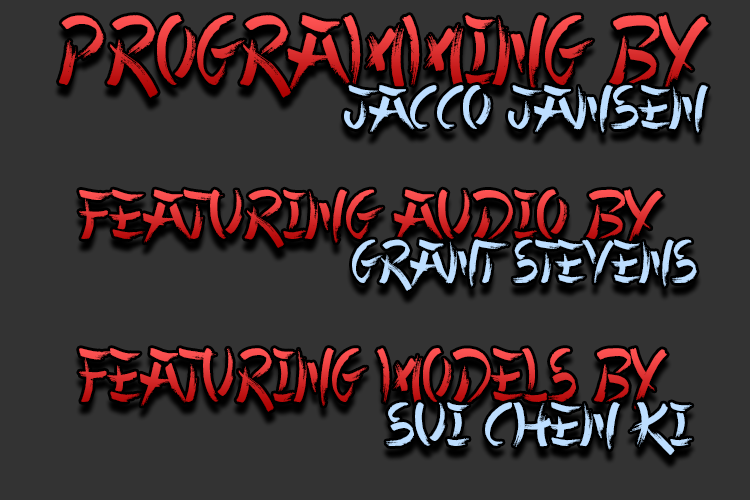
<style>
.page{position:relative;width:750px;height:500px;background:#333333}
.page>*{position:absolute;margin:0}
.t1{font:99.6px "ChineseTakeaway";scale:0.92 1}
.t2{font:62.6px "ChineseTakeaway";color:#bddeff;scale:1.05 1}
.t3{font:70.2px "ChineseTakeaway"}
.t4{font:61.7px "ChineseTakeaway";color:#bddeff;scale:0.95 1}
.t5{font:76.8px "ChineseTakeaway";scale:0.88 1}
.t6{font:62.1px "ChineseTakeaway";color:#bddeff;scale:1.09 1}
</style>
<div class="page">
<p class="t1" style="left:59px;top:14px;width:650px;height:84px">Programming by</p>
<p class="t2" style="left:344px;top:85px;width:364px;height:48px">Jacco Jansen</p>
<p class="t3" style="left:79px;top:189px;width:584px;height:59px">featuring Audio by</p>
<p class="t4" style="left:352px;top:239px;width:345px;height:52px">Grant Stevens</p>
<p class="t5" style="left:79px;top:348px;width:588px;height:64px">featuring Models by</p>
<p class="t6" style="left:386px;top:402px;width:306px;height:53px">Sui Chen Ki</p>
</div>
